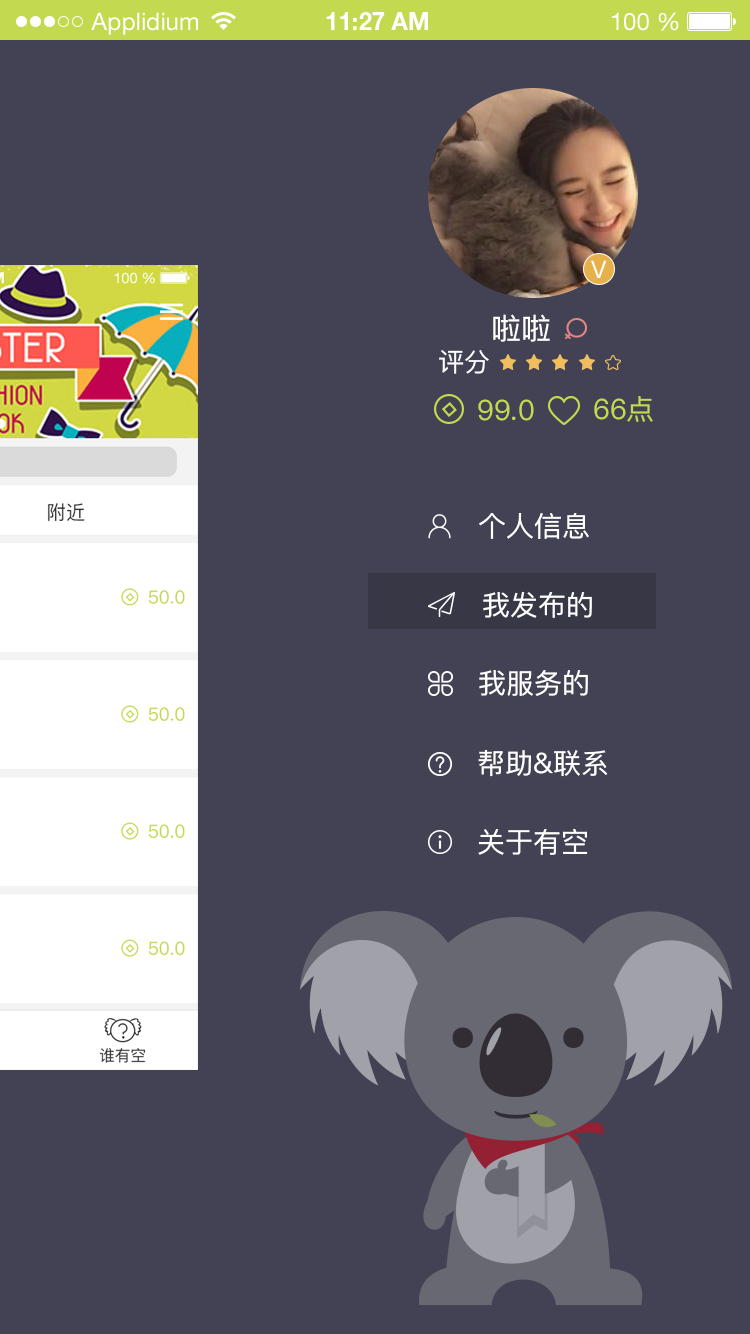
<style>
.page{position:relative;width:750px;height:1334px;background:#424254}
.page>*{position:absolute;margin:0}
.t1{font:24px "HelveticaNeueLTStd-Roman";color:#ffffff}
.t2{font:24px "HelveticaNeueLTStd-Bd";color:#ffffff}
.t3{font:30px "PingFangSC-Regular";color:#ffffff}
.t4{font:26px "PingFangSC-Regular";color:#ffffff}
.t5{font:28px "PingFangSC-Regular";color:#c3d94f}
.t6{font:28px "PingFangSC-Regular";color:#ffffff}
</style>
<div class="page">
<p class="t1" style="left:91px;top:12px;width:107px;height:23px">Applidium</p>
<p class="t2" style="left:326px;top:12px;width:102px;height:18px">11:27 AM</p>
<p class="t1" style="left:612px;top:12px;width:67px;height:19px">100 %</p>
<p class="t3" style="left:493px;top:314px;width:57px;height:28px">啦啦</p>
<p class="t4" style="left:439px;top:350px;width:50px;height:24px">评分</p>
<p class="t5" style="left:478px;top:399px;width:56px;height:22px">99.0</p>
<p class="t5" style="left:594px;top:396px;width:59px;height:26px">66点</p>
<p class="t6" style="left:479px;top:513px;width:110px;height:26px">个人信息</p>
<p class="t6" style="left:483px;top:591px;width:109px;height:27px">我发布的</p>
<p class="t6" style="left:479px;top:670px;width:109px;height:26px">我服务的</p>
<p class="t6" style="left:478px;top:750px;width:130px;height:27px">帮助&amp;联系</p>
<p class="t6" style="left:478px;top:829px;width:110px;height:26px">关于有空</p>
</div>
